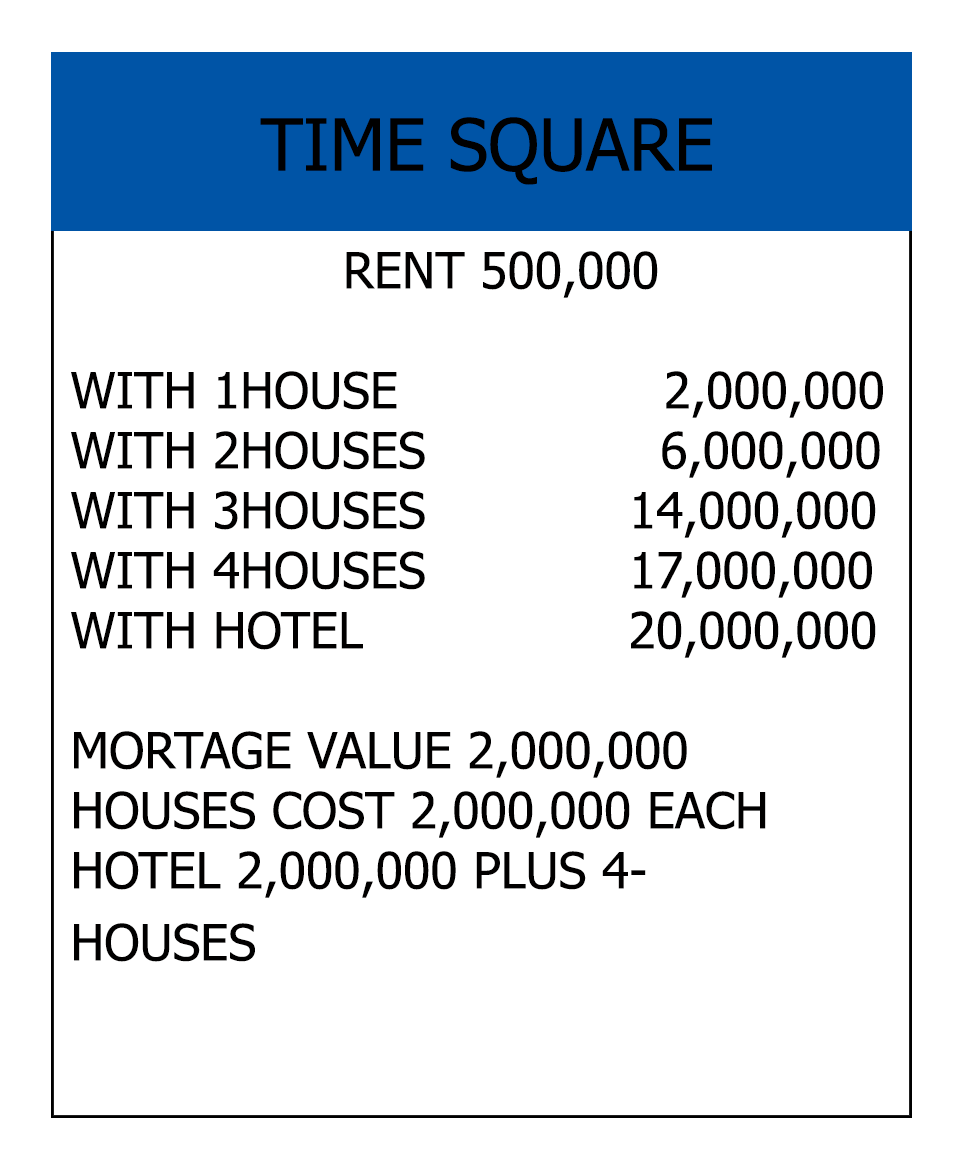
<style>
.page{position:relative;width:966px;height:1164px;background:#ffffff}
.page>*{position:absolute;margin:0}
.t1{font:72px "Tahoma";color:#000000}
.t2{font:50px "Tahoma";color:#010000}
</style>
<div class="page">
<p class="t1" style="left:260px;top:117px;width:452px;height:68px">TIME SQUARE</p>
<p class="t2" style="left:71px;top:251px;width:812px;height:711px;text-align:center">RENT 500,000<br><br>WITH 1HOUSE                 2,000,000<br>WITH 2HOUSES               6,000,000<br>WITH 3HOUSES             14,000,000<br>WITH 4HOUSES             17,000,000<br>WITH HOTEL                 20,000,000<br><br>MORTAGE VALUE 2,000,000<br>HOUSES COST 2,000,000 EACH<br>HOTEL 2,000,000 PLUS 4-<br>HOUSES</p>
</div>
